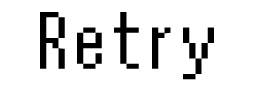
<style>
.page{position:relative;width:253px;height:92px;background:#ffffff}
.page>*{position:absolute;margin:0}
.t1{font:82.5px "ReturnOfGanonReg";color:#000000;scale:1.2 1}
</style>
<div class="page">
<p class="t1" style="left:40px;top:12px;width:174px;height:68px">Retry</p>
</div>
